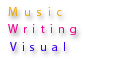
<style>
.page{position:relative;width:116px;height:59px;background:#ffffff}
.page>*{position:absolute;margin:0}
.t1{font:12px "MyriadPro-Regular";letter-spacing:0.52em;color:#eca700}
.t2{font:12px "MyriadPro-Regular";letter-spacing:0.44em;color:#ec008c}
.t3{font:12px "MyriadPro-Regular";letter-spacing:0.44em;color:#3800ec}
</style>
<div class="page">
<p class="t1" style="left:8px;top:7px;width:54px;height:9px">Music</p>
<p class="t2" style="left:8px;top:24px;width:68px;height:11px">Writing</p>
<p class="t3" style="left:10px;top:42px;width:55px;height:9px">Visual</p>
</div>
